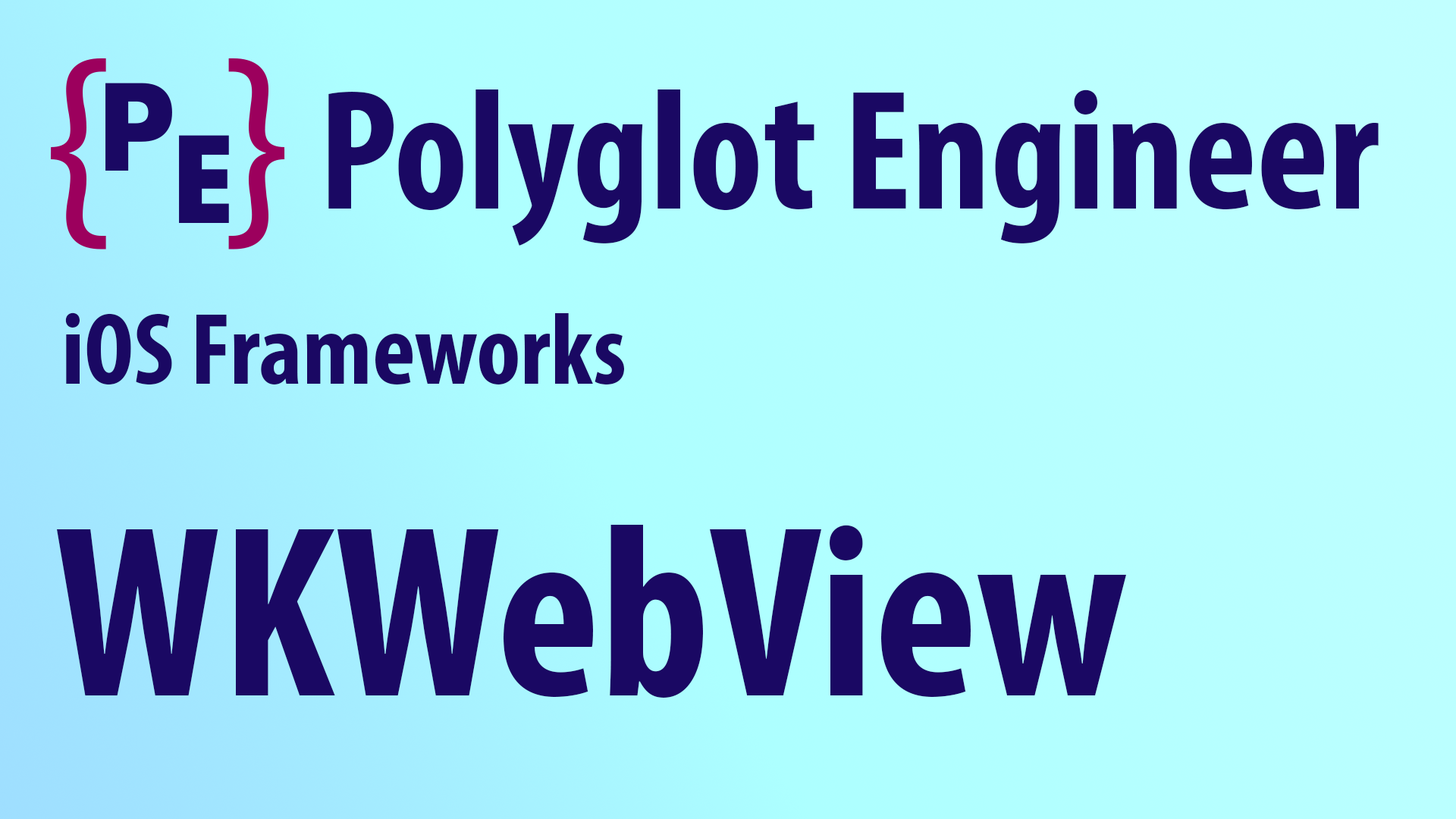
<style>
.page{position:relative;width:1456px;height:819px}
.page>*{position:absolute;margin:0}
.t1{font:172.1px "MyriadPro-BoldCond";color:#1a0863}
.t2{font:102.4px "MyriadPro-BoldCond";color:#1a0863}
.t3{font:246.5px "MyriadPro-BoldCond";color:#1a0863}
</style>
<div class="page">
<p class="t1" style="left:328px;top:89px;width:1051px;height:157px">Polyglot Engineer</p>
<p class="t2" style="left:65px;top:312px;width:559px;height:73px">iOS Frameworks</p>
<p class="t3" style="left:57px;top:525px;width:1069px;height:173px">WKWebView</p>
</div>
